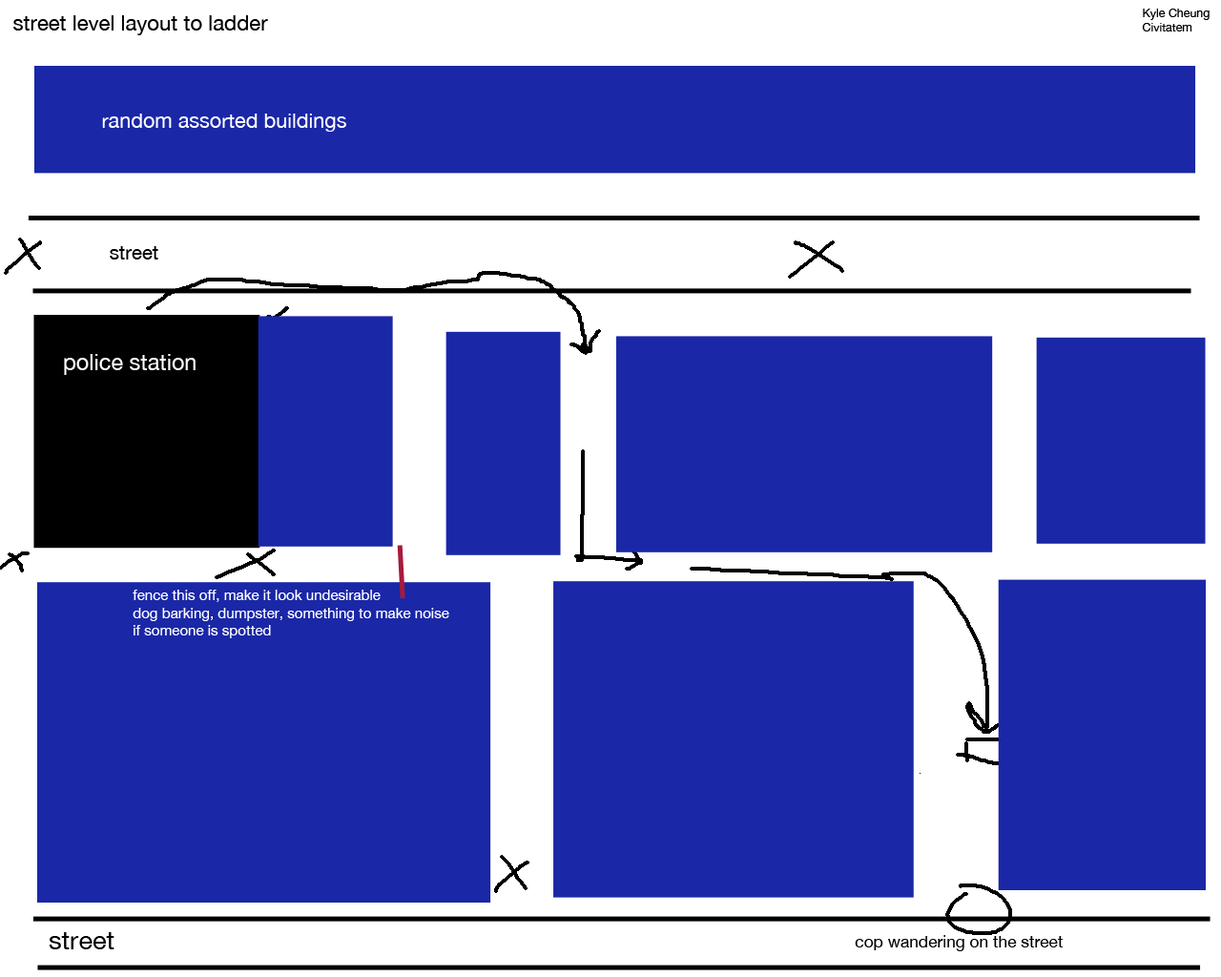
<style>
.page{position:relative;width:1221px;height:977px;background:#1a27a7}
.page>*{position:absolute;margin:0}
.t1{font:21.1px "HelveticaNeue";color:#000000}
.t2{font:11.8px "HelveticaNeue";color:#000000}
.t3{font:20.6px "HelveticaNeue";color:#ffffff}
.t4{font:19.4px "HelveticaNeue";color:#000000}
.t5{font:22.4px "HelveticaNeue";color:#ffffff}
.t6{font:14.4px "HelveticaNeue";color:#ffffff}
.t7{font:26px "HelveticaNeue";color:#000000}
.t8{font:16.6px "HelveticaNeue";color:#000000}
</style>
<div class="page">
<p class="t1" style="left:13px;top:15px;width:255px;height:20px">street level layout to ladder</p>
<p class="t2" style="left:1142px;top:9px;width:67px;height:22px">Kyle Cheung<br>Civitatem</p>
<p class="t3" style="left:102px;top:114px;width:244px;height:18px">random assorted buildings</p>
<p class="t4" style="left:110px;top:246px;width:48px;height:13px">street</p>
<p class="t5" style="left:64px;top:354px;width:132px;height:21px">police station</p>
<p class="t6" style="left:133px;top:589px;width:316px;height:49px">fence this off, make it look undesirable<br>dog barking, dumpster, something to make noise<br>if someone is spotted</p>
<p class="t7" style="left:49px;top:932px;width:65px;height:17px">street</p>
<p class="t8" style="left:855px;top:935px;width:208px;height:16px">cop wandering on the street</p>
</div>
